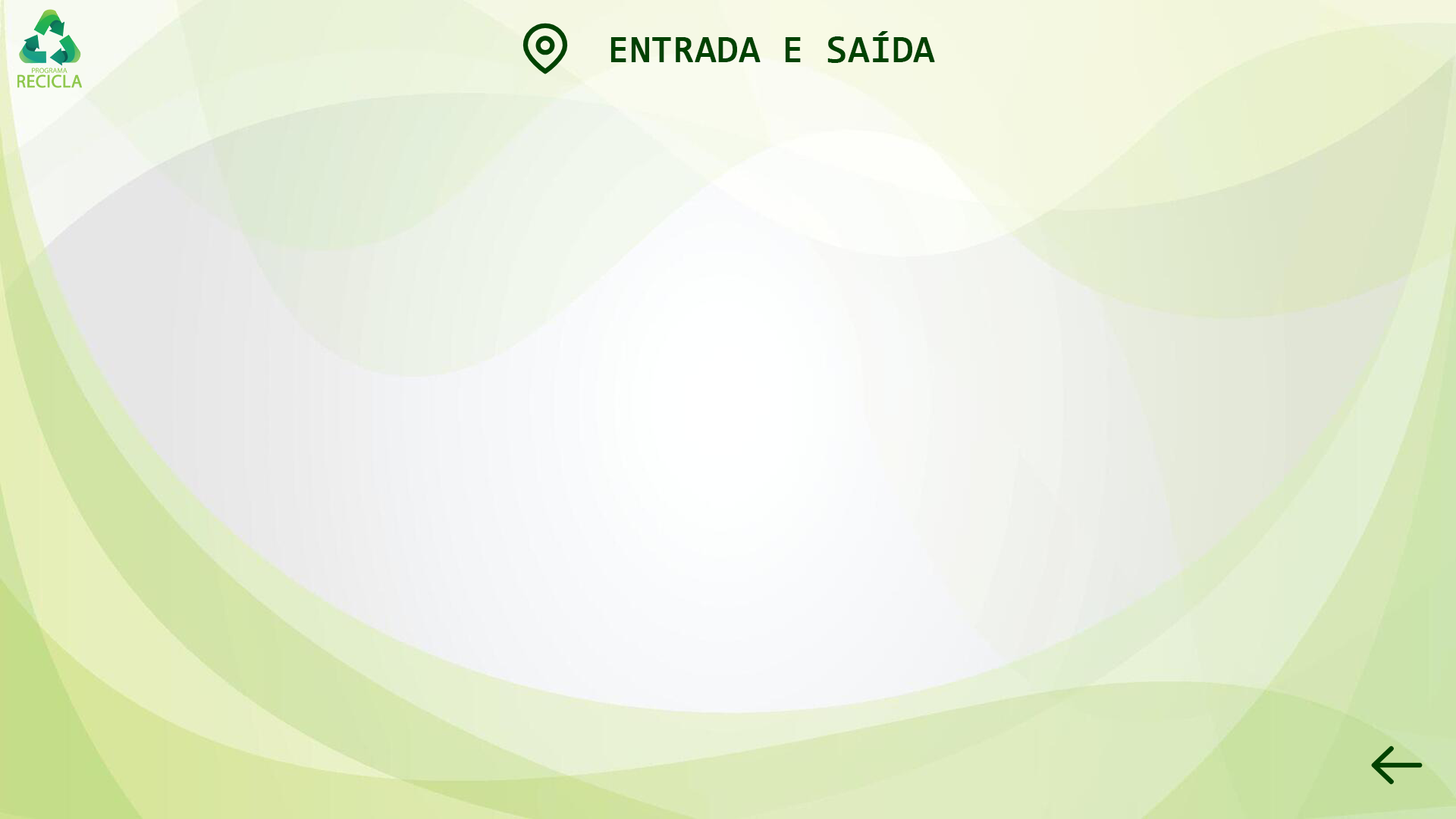
<style>
.page{position:relative;width:1456px;height:819px}
.page>*{position:absolute;margin:0}
.t1{font:37.9px "Consolas";color:#004201;font-weight:bold}
</style>
<div class="page">
<p class="t1" style="left:610px;top:31px;width:325px;height:32px">ENTRADA E SAÍDA</p>
</div>
